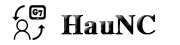
<style>
.page{position:relative;width:180px;height:45px;background:#ffffff}
.page>*{position:absolute;margin:0}
.t1{font:28px "VNI-Times-Bold";color:#000000;font-weight:bold}
</style>
<div class="page">
<p class="t1" style="left:61px;top:14px;width:95px;height:21px">HauNC</p>
</div>
